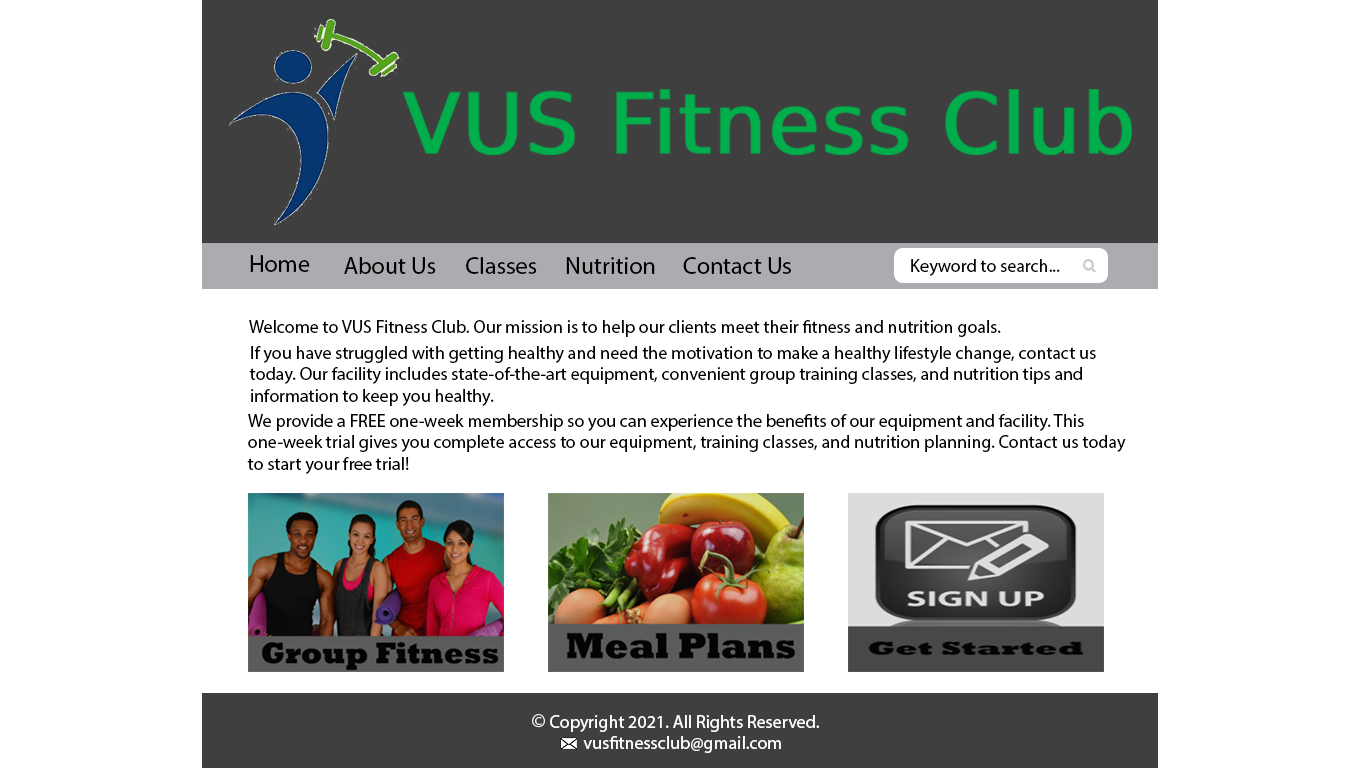
<style>
.page{position:relative;width:1366px;height:768px;background:#ffffff}
.page>*{position:absolute;margin:0}
.t1{font:24px "MyriadPro-Regular";color:#000000}
.t2{font:18px "MyriadPro-Regular";color:#030303}
.t3{font:18px "MyriadPro-Regular";color:#000000}
.t4{font:18px "MyriadPro-Regular";color:#ffffff}
.t5{font:21px "MyriadPro-Regular";color:#ffffff}
</style>
<div class="page">
<p class="t1" style="left:250px;top:255px;width:60px;height:17px">Home</p>
<p class="t1" style="left:344px;top:257px;width:92px;height:17px">About Us</p>
<p class="t1" style="left:466px;top:257px;width:71px;height:17px">Classes</p>
<p class="t1" style="left:566px;top:257px;width:89px;height:17px">Nutrition</p>
<p class="t1" style="left:683px;top:257px;width:108px;height:17px">Contact Us</p>
<p class="t2" style="left:911px;top:259px;width:149px;height:17px">Keyword to search...</p>
<p class="t3" style="left:249px;top:320px;width:752px;height:17px">Welcome to VUS Fitness Club. Our mission is to help our clients meet their fitness and nutrition goals.</p>
<p class="t3" style="left:249px;top:346px;width:847px;height:60px">If you have struggled with getting healthy and need the motivation to make a healthy lifestyle change, contact us today. Our facility includes state-of-the-art equipment, convenient group training classes, and nutrition tips and information to keep you healthy.</p>
<p class="t3" style="left:247px;top:414px;width:879px;height:60px">We provide a FREE one-week membership so you can experience the benefits of our equipment and facility. This one-week trial gives you complete access to our equipment, training classes, and nutrition planning. Contact us today to start your free trial!</p>
<p class="t4" style="left:532px;top:714px;width:287px;height:18px"><span class="t5">©</span> Copyright 2021. All Rights Reserved.</p>
<p class="t4" style="left:583px;top:736px;width:198px;height:17px">vusfitnessclub@gmail.com</p>
</div>
